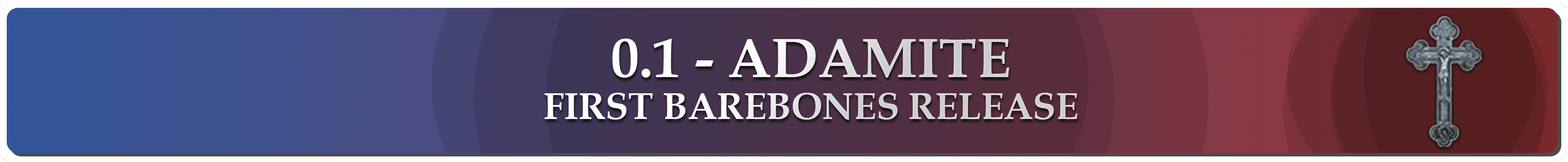
<style>
.page{position:relative;width:1568px;height:162px}
.page>*{position:absolute;margin:0}
.t1{font:37.3px/42px "BookAntiqua-Bold"}
.t2{font:56px "BookAntiqua-Bold"}
</style>
<div class="page">
<p class="t1" style="left:544px;top:39px;width:533px;height:81px;text-align:center"><span class="t2">0.1 - ADAMITE<br></span>FIRST BAREBONES RELEASE</p>
</div>
